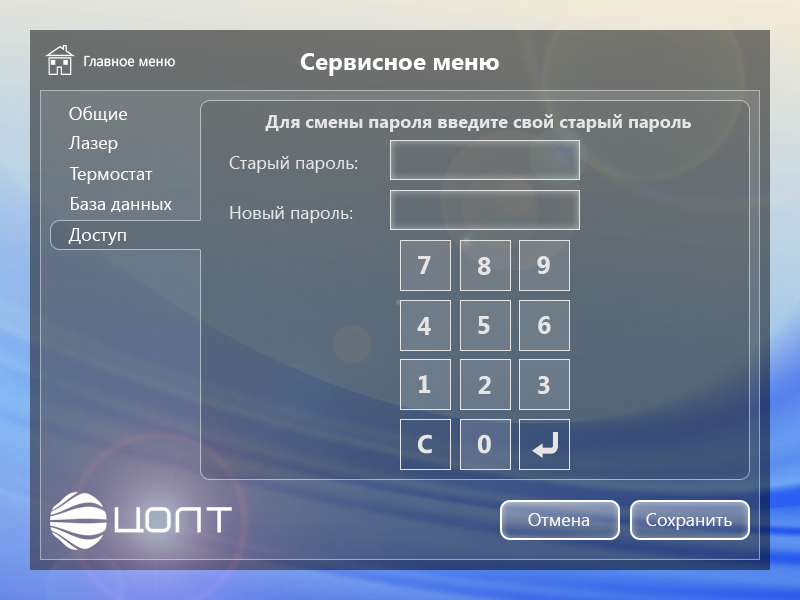
<style>
.page{position:relative;width:800px;height:600px}
.page>*{position:absolute;margin:0}
.t1{font:24px "SegoeUI-Bold";color:#ffffff}
.t2{font:14.2px "SegoeUI";color:#ffffff}
.t3{font:18px "SegoeUI";color:#ffffff}
.t4{font:18px "SegoeUI-Bold";color:#e5e5e5}
.t5{font:18px "SegoeUI";color:#e5e5e5}
.t6{font:25.5px "SegoeUI-Bold";color:#e5e5e5}
.t7{font:25.6px "SegoeUI-Bold";color:#e5e5e5}
</style>
<div class="page">
<p class="t1" style="left:300px;top:53px;width:199px;height:23px">Сервисное меню</p>
<p class="t2" style="left:84px;top:55px;width:91px;height:12px">Главное меню</p>
<p class="t3" style="left:69px;top:106px;width:58px;height:16px">Общие</p>
<p class="t4" style="left:265px;top:114px;width:426px;height:18px">Для смены пароля введите свой старый пароль</p>
<p class="t3" style="left:68px;top:136px;width:50px;height:17px">Лазер</p>
<p class="t5" style="left:229px;top:156px;width:129px;height:17px">Старый пароль:</p>
<p class="t3" style="left:69px;top:167px;width:84px;height:17px">Термостат</p>
<p class="t3" style="left:71px;top:197px;width:101px;height:15px">База данных</p>
<p class="t5" style="left:230px;top:206px;width:123px;height:17px">Новый пароль:</p>
<p class="t3" style="left:68px;top:228px;width:58px;height:17px">Доступ</p>
<p class="t6" style="left:418px;top:256px;width:13px;height:18px">7</p>
<p class="t6" style="left:478px;top:257px;width:13px;height:18px">8</p>
<p class="t6" style="left:537px;top:256px;width:13px;height:18px">9</p>
<p class="t6" style="left:417px;top:317px;width:14px;height:18px">4</p>
<p class="t6" style="left:478px;top:316px;width:12px;height:18px">5</p>
<p class="t6" style="left:538px;top:316px;width:13px;height:18px">6</p>
<p class="t6" style="left:419px;top:375px;width:12px;height:18px">1</p>
<p class="t6" style="left:478px;top:376px;width:13px;height:18px">2</p>
<p class="t6" style="left:538px;top:376px;width:12px;height:18px">3</p>
<p class="t7" style="left:418px;top:434px;width:14px;height:20px">C</p>
<p class="t7" style="left:477px;top:434px;width:14px;height:20px">0</p>
<p class="t3" style="left:528px;top:513px;width:61px;height:13px">Отмена</p>
<p class="t3" style="left:646px;top:513px;width:86px;height:17px">Сохранить</p>
</div>
